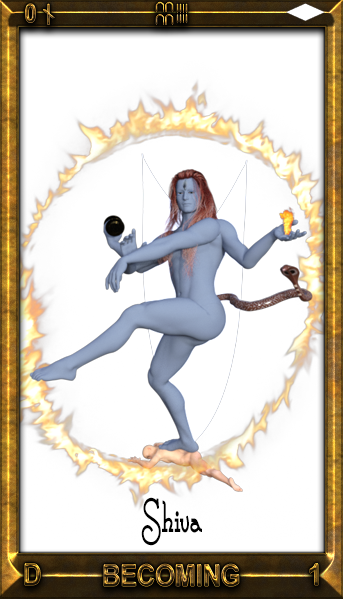
<style>
.page{position:relative;width:343px;height:599px;background:#ffffff}
.page>*{position:absolute;margin:0}
.t1{font:25.9px "Arial-BoldMT";scale:0.84 1}
.t2{font:25.9px "Geneva";scale:0.84 1}
.t3{font:53.4px "CalamityJaneNF-Bold";color:#000000;scale:0.61 1}
.t4{font:30px "Arial-BoldMT";scale:0.84 1}
</style>
<div class="page">
<p class="t1" style="left:25px;top:3px;width:11px;height:20px">0</p>
<p class="t2" style="left:43px;top:4px;width:12px;height:21px">ᚾ</p>
<p class="t3" style="left:141px;top:497px;width:61px;height:49px">Shiva</p>
<p class="t4" style="left:25px;top:563px;width:16px;height:22px">D</p>
<p class="t4" style="left:104px;top:564px;width:135px;height:23px">BECOMING</p>
<p class="t4" style="left:310px;top:563px;width:8px;height:22px">1</p>
</div>
